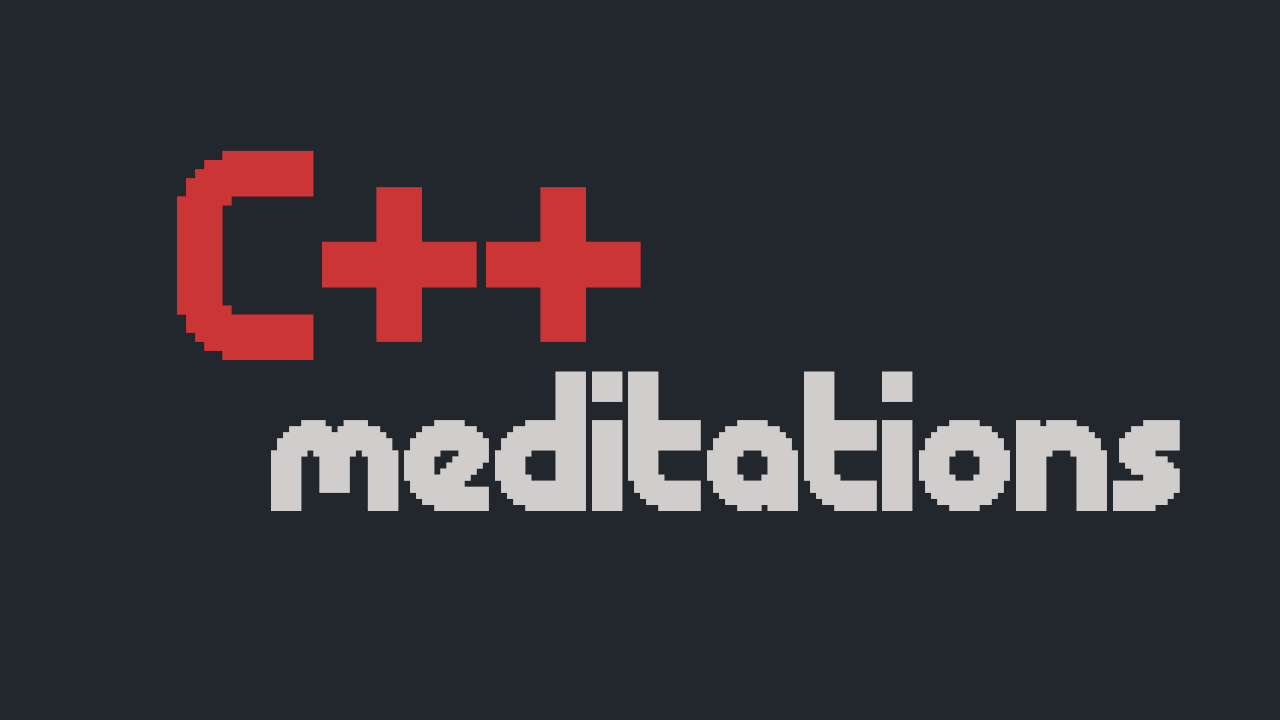
<style>
.page{position:relative;width:1280px;height:720px;background:#22272e}
.page>*{position:absolute;margin:0}
.t1{font:300px "ChevyRay---Roundabout";color:#cb3535}
.t2{font:200px "ChevyRay---Roundabout";color:#d2cdcd}
</style>
<div class="page">
<p class="t1" style="left:177px;top:150px;width:464px;height:210px">C++</p>
<p class="t2" style="left:271px;top:371px;width:909px;height:140px">meditations</p>
</div>
